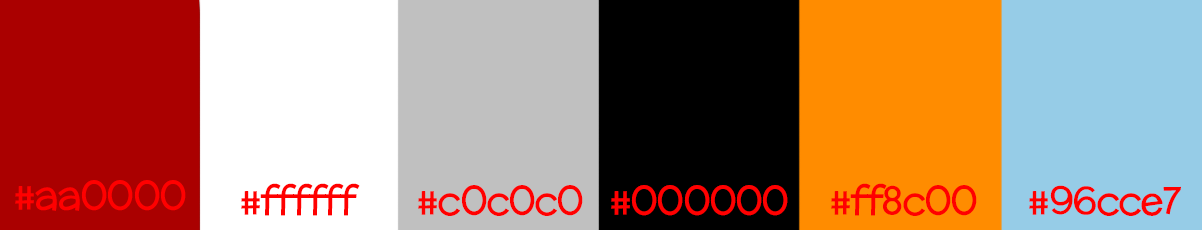
<style>
.page{position:relative;width:1202px;height:230px}
.page>*{position:absolute;margin:0}
.t1{font:40px "McLaren-Regular";letter-spacing:-0.05em;color:#ff0000}
</style>
<div class="page">
<p class="t1" style="left:15px;top:180px;width:171px;height:31px">#aa0000</p>
<p class="t1" style="left:241px;top:183px;width:119px;height:33px">#ffffff</p>
<p class="t1" style="left:418px;top:185px;width:165px;height:31px">#c0c0c0</p>
<p class="t1" style="left:611px;top:185px;width:177px;height:31px">#000000</p>
<p class="t1" style="left:831px;top:183px;width:146px;height:33px">#ff8c00</p>
<p class="t1" style="left:1029px;top:185px;width:152px;height:31px">#96cce7</p>
</div>
